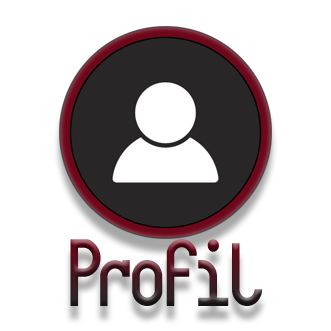
<style>
.page{position:relative;width:331px;height:331px;background:#ffffff}
.page>*{position:absolute;margin:0}
.t1{font:83.3px "Targa";scale:0.9 1}
</style>
<div class="page">
<p class="t1" style="left:70px;top:239px;width:192px;height:67px">Profil</p>
</div>
